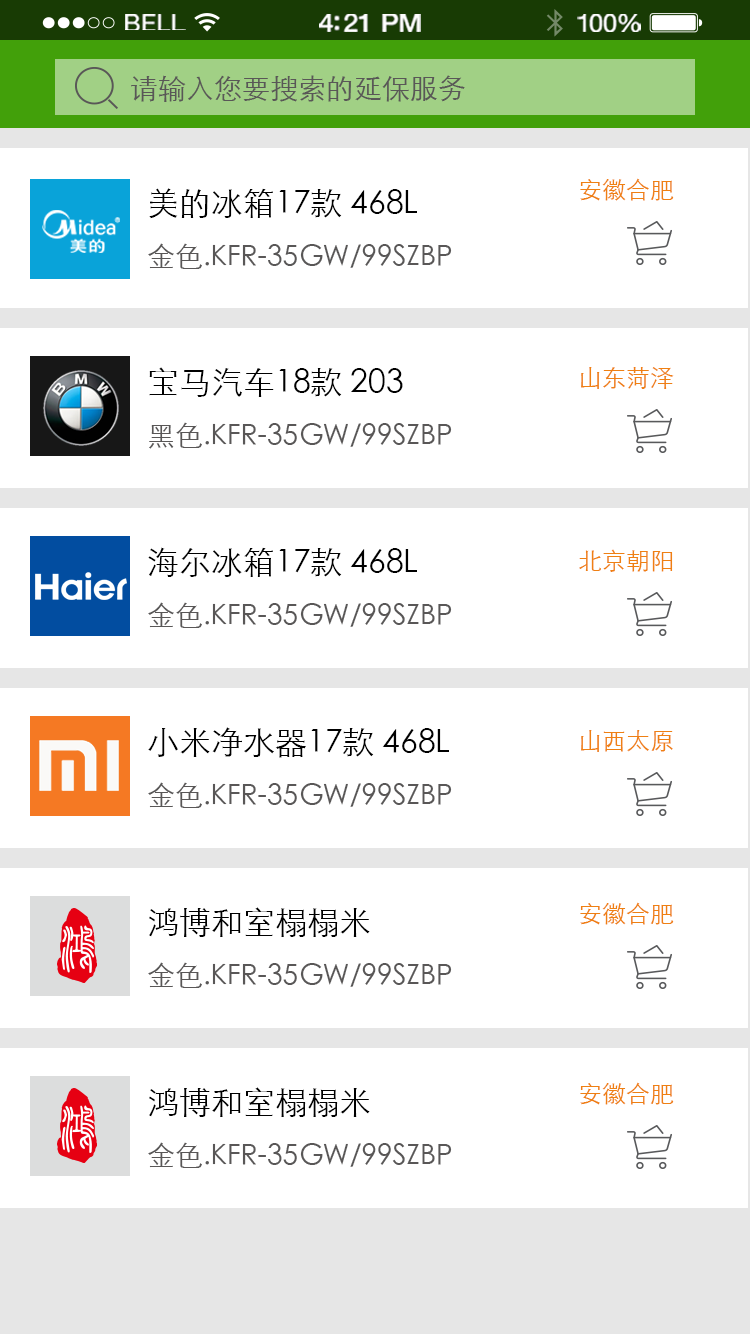
<style>
.page{position:relative;width:750px;height:1334px;background:#ffffff}
.page>*{position:absolute;margin:0}
.t1{font:23.3px "HelveticaNeue";letter-spacing:0.02em;color:#ffffff;scale:1.06 1}
.t2{font:25.3px "HelveticaNeue-Medium";letter-spacing:-0.02em;color:#ffffff;scale:1.06 1}
.t3{font:24.3px "HelveticaNeue";letter-spacing:-0.02em;color:#ffffff;scale:1.06 1}
.t4{font:28px "STXihei";color:#595757}
.t5{font:24px "STXihei";color:#ef8013}
.t6{font:28px/56px "STXihei";color:#595757}
.t7{font:32px/56px "STXihei";color:#000000}
</style>
<div class="page">
<p class="t1" style="left:125px;top:14px;width:61px;height:16px">BELL</p>
<p class="t2" style="left:319px;top:14px;width:102px;height:18px">4:21 PM</p>
<p class="t3" style="left:577px;top:14px;width:64px;height:18px">100%</p>
<p class="t4" style="left:131px;top:75px;width:334px;height:27px">请输入您要搜索的延保服务</p>
<p class="t5" style="left:580px;top:178px;width:94px;height:23px">安徽合肥</p>
<p class="t6" style="left:148px;top:188px;width:304px;height:81px"><span class="t7">美的冰箱17款 468L <br></span>金色.KFR-35GW/99SZBP</p>
<p class="t6" style="left:149px;top:367px;width:303px;height:82px"><span class="t7">宝马汽车18款 203<br></span>黑色.KFR-35GW/99SZBP</p>
<p class="t5" style="left:581px;top:367px;width:93px;height:22px">山东菏泽</p>
<p class="t6" style="left:148px;top:547px;width:304px;height:81px"><span class="t7">海尔冰箱17款 468L<br></span>金色.KFR-35GW/99SZBP</p>
<p class="t5" style="left:579px;top:549px;width:94px;height:23px">北京朝阳</p>
<p class="t6" style="left:148px;top:727px;width:304px;height:81px"><span class="t7">小米净水器17款 468L<br></span>金色.KFR-35GW/99SZBP</p>
<p class="t5" style="left:581px;top:730px;width:92px;height:22px">山西太原</p>
<p class="t5" style="left:580px;top:902px;width:94px;height:23px">安徽合肥</p>
<p class="t6" style="left:148px;top:907px;width:304px;height:81px"><span class="t7">鸿博和室榻榻米<br></span>金色.KFR-35GW/99SZBP</p>
<p class="t5" style="left:580px;top:1082px;width:94px;height:23px">安徽合肥</p>
<p class="t6" style="left:148px;top:1087px;width:304px;height:81px"><span class="t7">鸿博和室榻榻米<br></span>金色.KFR-35GW/99SZBP</p>
</div>
